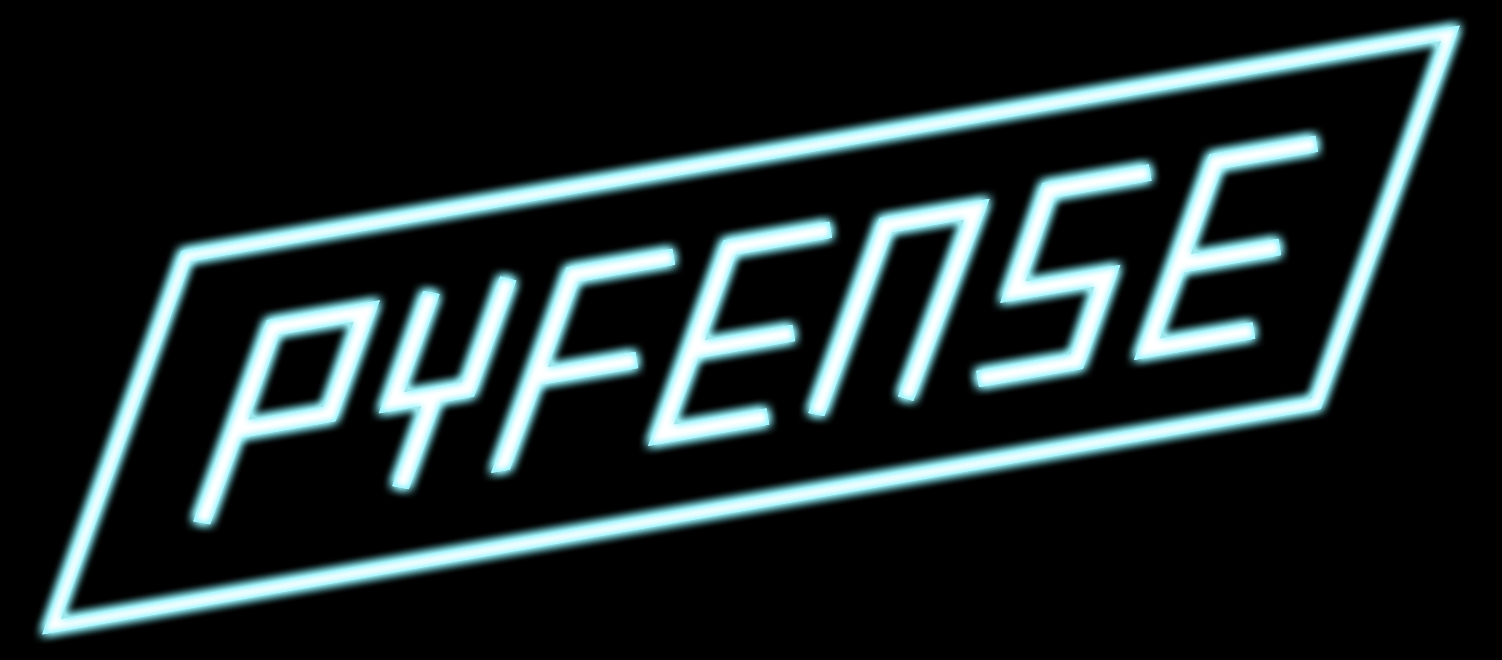
<style>
.page{position:relative;width:1502px;height:660px;background:#000000}
.page>*{position:absolute;margin:0}
.t1{font:255px "slantedITALICshift-Black"}
</style>
<div class="page">
<p class="t1" style="left:193px;top:135px;width:1126px;height:390px;rotate:-10deg">P FEnSE</p>
<p class="t1" style="left:193px;top:135px;width:1126px;height:390px;rotate:-10deg">P FEnSE</p>
</div>
